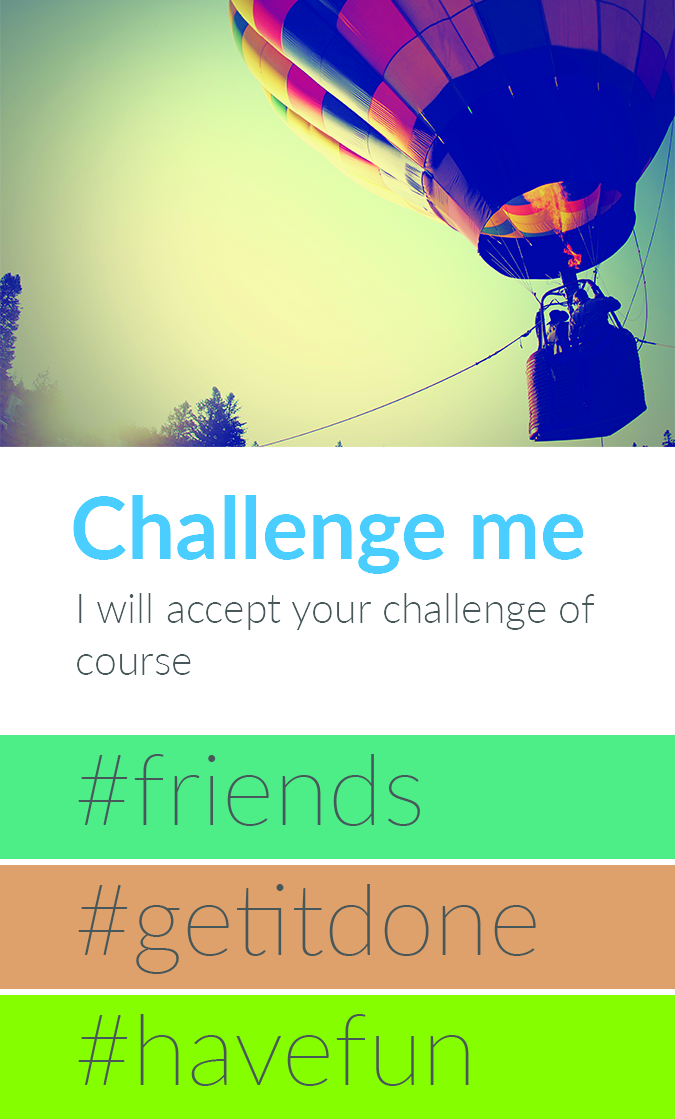
<style>
.page{position:relative;width:675px;height:1119px;background:#ffffff}
.page>*{position:absolute;margin:0}
.t1{font:86px "Lato-Bold";color:#4acdff}
.t2{font:41px/52px "Lato-Light";color:#48585a}
</style>
<div class="page">
<p class="t1" style="left:73px;top:495px;width:511px;height:79px">Challenge me</p>
<p class="t2" style="left:77px;top:593px;width:518px;height:82px;text-align:right">I will accept your challenge of course</p>
</div>
